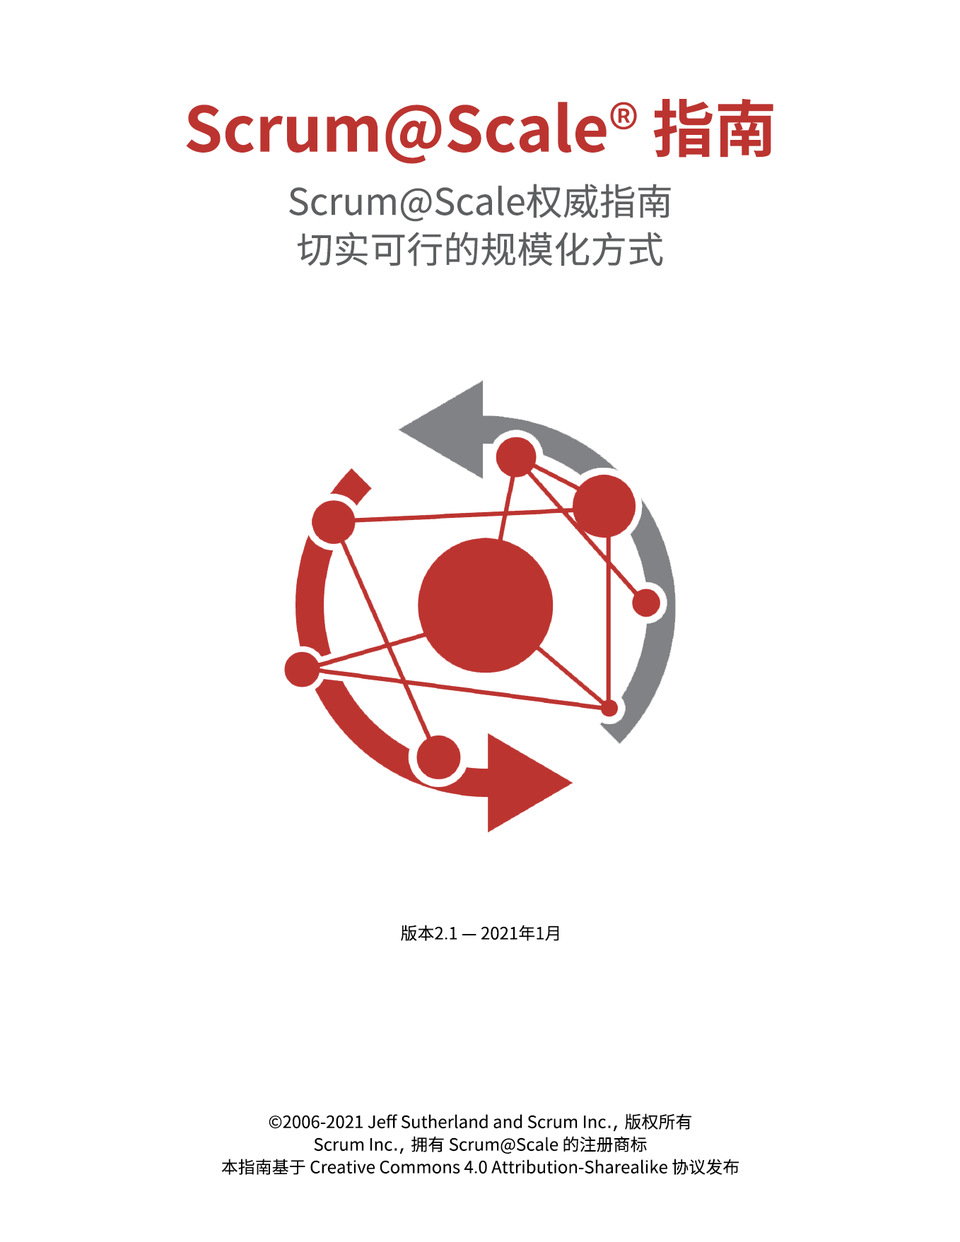
<style>
.page{position:relative;width:960px;height:1242px;background:#ffffff}
.page>*{position:absolute;margin:0}
.t1{font:62.2px "NotoSansCJKsc-Bold";color:#bc3430}
.t2{font:62.2px "NotoSansCJKsc-Regular";color:#bc3430}
.t3{font:36.8px/48.1px "NotoSansCJKsc-Regular";color:#5e5f61}
.t4{font:17px "NotoSansCJKsc-Regular";color:#000000}
.t5{font:17px/22.6px "NotoSansCJKsc-Regular";color:#000000}
.t6{font:17px/22.6px "Verdana";color:#000000}
</style>
<div class="page">
<p class="t1" style="left:186px;top:99px;width:587px;height:65px">Scrum@Scale<span class="t2">® </span>指南</p>
<p class="t3" style="left:289px;top:184px;width:382px;height:82px;text-align:center">Scrum@Scale权威指南<br>切实可行的规模化方式</p>
<p class="t4" style="left:401px;top:925px;width:158px;height:16px">版本2.1 — 2021年1月</p>
<p class="t5" style="left:221px;top:1114px;width:518px;height:61px;text-align:center">©2006-2021 Jeff Sutherland and Scrum Inc<span class="t6">., </span>版权所有<br>Scrum Inc<span class="t6">., </span>拥有 Scrum@Scale 的注册商标<br>本指南基于 Creative Commons 4.0 Attribution-Sharealike 协议发布</p>
</div>
